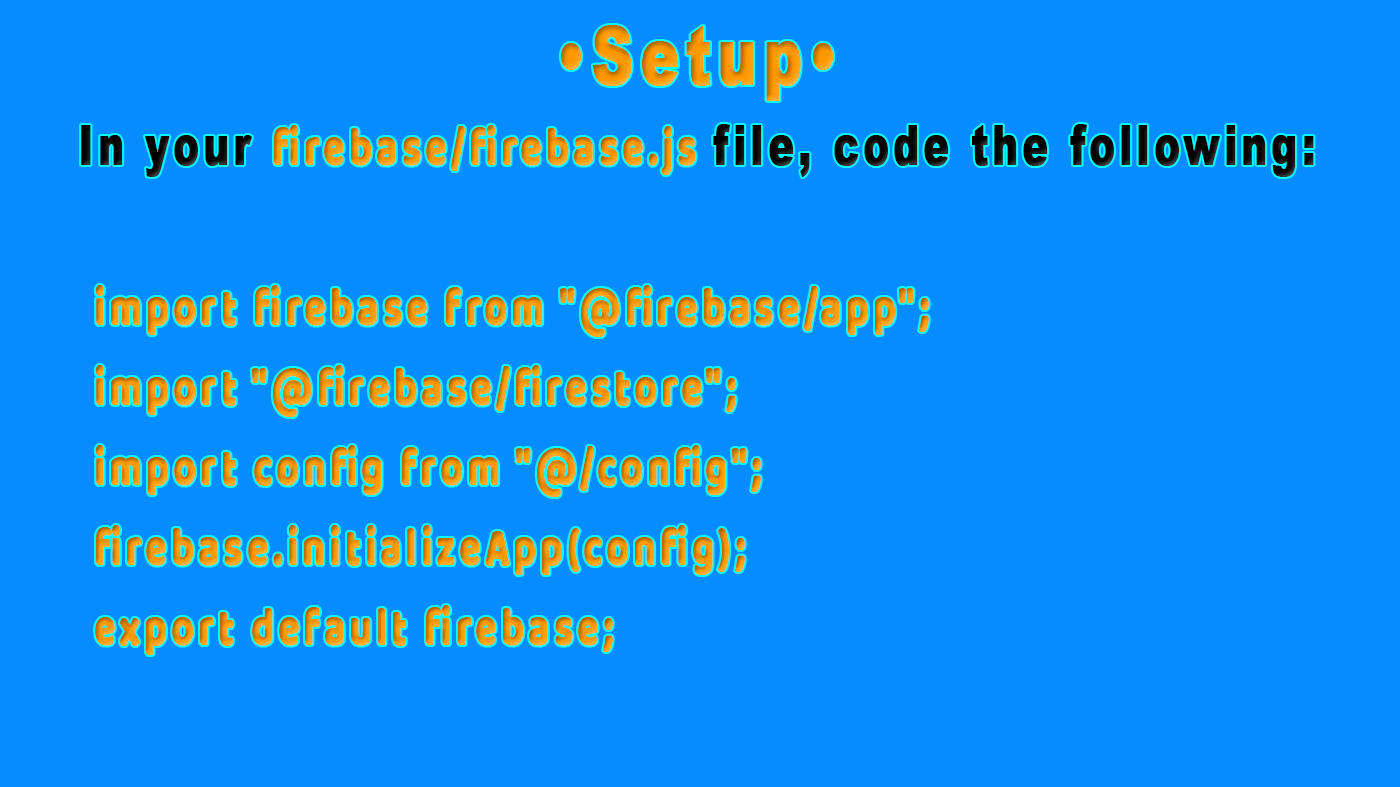
<style>
.page{position:relative;width:1400px;height:787px;background:#058cff}
.page>*{position:absolute;margin:0}
.t1{font:53.8px/80px "Baloo";letter-spacing:0.1em;font-weight:bold;scale:0.71 1}
.t2{font:80.6px/80px "Arial-Black";letter-spacing:0.1em;font-weight:bold;scale:0.71 1}
.t3{font:53.8px/80px "Arial-Black";letter-spacing:0.1em;font-weight:bold;scale:0.71 1}
</style>
<div class="page">
<p class="t1" style="left:81px;top:25px;width:1233px;height:630px;text-align:center"><span class="t2">•Setup•<br></span><span class="t3">In your </span>firebase/firebase.js <span class="t3">file, code the following:<br></span>     <br>     import firebase from "@firebase/app";<br>     import "@firebase/firestore";<br>     import config from "@/config";<br>     firebase.initializeApp(config);     <br>     export default firebase;</p>
</div>
